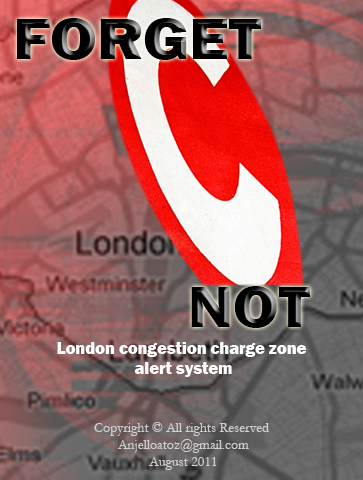
<style>
.page{position:relative;width:363px;height:480px}
.page>*{position:absolute;margin:0}
.t1{font:59.5px "FranklinGothic-Heavy";color:#000000;scale:1.13 1}
.t2{font:59.5px "FranklinGothic-Heavy";color:#000000;scale:1.11 1}
.t3{font:16.7px "FranklinGothic-Heavy";color:#ffffff}
.t4{font:14px "Garamond";color:#d1d0d0}
</style>
<div class="page">
<p class="t1" style="left:17px;top:18px;width:244px;height:42px">FORGET</p>
<p class="t2" style="left:191px;top:286px;width:119px;height:42px">NOT</p>
<p class="t3" style="left:57px;top:342px;width:249px;height:35px;text-align:center">London congestion charge zone<br> alert system</p>
<p class="t4" style="left:94px;top:422px;width:175px;height:48px;text-align:center">Copyright © All rights Reserved <br>Anjelloatoz@gmail.com<br>August 2011</p>
</div>
